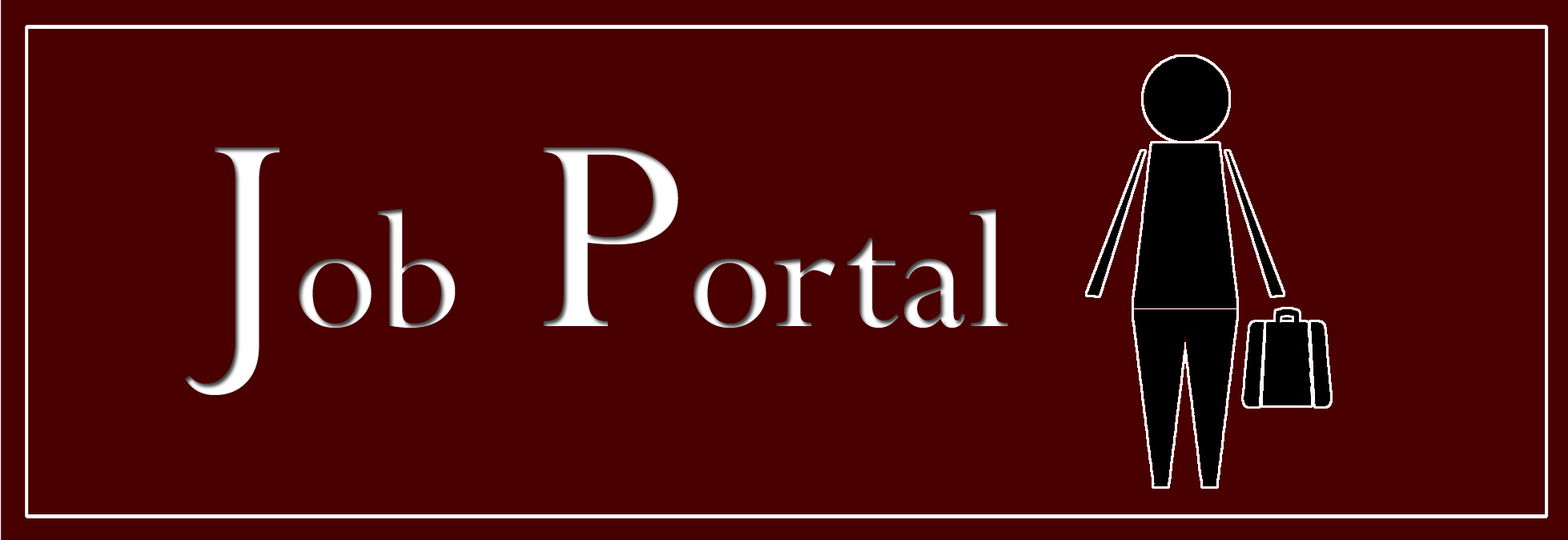
<style>
.page{position:relative;width:1568px;height:540px;background:#480000}
.page>*{position:absolute;margin:0}
.t1{font:186.9px "Perpetua";color:#ffffff}
.t2{font:311.4px "Perpetua";color:#ffffff}
</style>
<div class="page">
<p class="t1" style="left:185px;top:147px;width:823px;height:248px"><span class="t2">    J</span>ob<span class="t2"> P</span>ortal</p>
</div>
